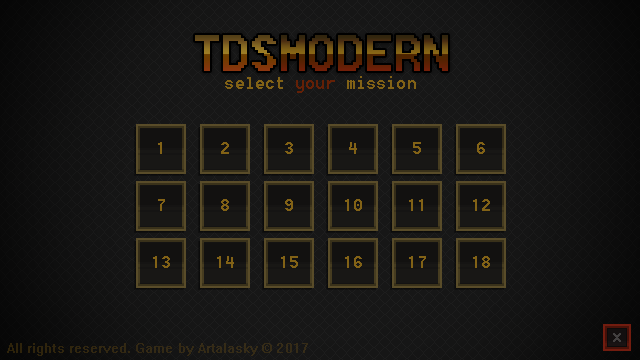
<style>
.page{position:relative;width:640px;height:360px}
.page>*{position:absolute;margin:0}
.t1{font:60px "Terminal";letter-spacing:0.01em}
.t2{font:12px "Terminal";letter-spacing:0.01em;color:#826216}
.t3{font:12px "Terminal";letter-spacing:0.01em;color:#642006}
.t4{font:24px "Terminal";letter-spacing:0.01em;color:#826216}
.t5{font:6px/60px "System";letter-spacing:0.01em;color:#342914}
</style>
<div class="page">
<p class="t1" style="left:195px;top:35px;width:253px;height:36px">TDSMODERN</p>
<p class="t2" style="left:225px;top:76px;width:191px;height:17px">select <span class="t3">your</span> mission</p>
<p class="t4" style="left:158px;top:142px;width:4px;height:12px">1</p>
<p class="t4" style="left:221px;top:142px;width:8px;height:12px">2</p>
<p class="t4" style="left:285px;top:142px;width:8px;height:12px">3</p>
<p class="t4" style="left:349px;top:142px;width:8px;height:12px">4</p>
<p class="t4" style="left:413px;top:142px;width:8px;height:12px">5</p>
<p class="t4" style="left:477px;top:142px;width:8px;height:12px">6</p>
<p class="t4" style="left:158px;top:199px;width:7px;height:12px">7</p>
<p class="t4" style="left:221px;top:199px;width:8px;height:12px">8</p>
<p class="t4" style="left:285px;top:199px;width:8px;height:12px">9</p>
<p class="t4" style="left:345px;top:199px;width:17px;height:12px">10</p>
<p class="t4" style="left:409px;top:199px;width:14px;height:12px">11</p>
<p class="t4" style="left:473px;top:199px;width:17px;height:12px">12</p>
<p class="t4" style="left:153px;top:256px;width:17px;height:12px">13</p>
<p class="t4" style="left:217px;top:256px;width:17px;height:12px">14</p>
<p class="t4" style="left:281px;top:256px;width:17px;height:12px">15</p>
<p class="t4" style="left:345px;top:256px;width:17px;height:12px">16</p>
<p class="t4" style="left:409px;top:256px;width:17px;height:12px">17</p>
<p class="t4" style="left:473px;top:256px;width:17px;height:12px">18</p>
<p class="t5" style="left:7px;top:343px;width:301px;height:13px">All rights reserved. Game by Artalasky © 2017</p>
</div>
